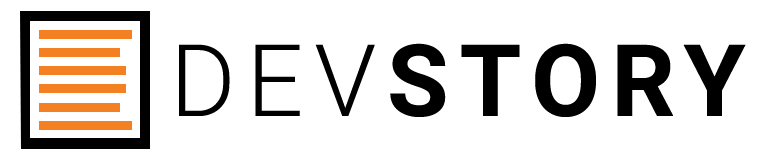
<style>
.page{position:relative;width:770px;height:160px;background:#ffffff}
.page>*{position:absolute;margin:0}
.t1{font:100px "Roboto-Bold";letter-spacing:0.075em;color:#000000;text-transform:uppercase}
.t2{font:100px "Roboto-Light";letter-spacing:0.075em;color:#000000;text-transform:uppercase}
</style>
<div class="page">
<p class="t1" style="left:179px;top:43px;width:567px;height:74px"><span class="t2">dev</span>story</p>
</div>
